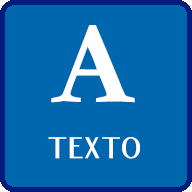
<style>
.page{position:relative;width:192px;height:192px;background:#0066ad}
.page>*{position:absolute;margin:0}
.t1{font:30px "PfennigBold";color:#ffffff}
</style>
<div class="page">
<p class="t1" style="left:48px;top:137px;width:92px;height:22px">TEXTO</p>
</div>
